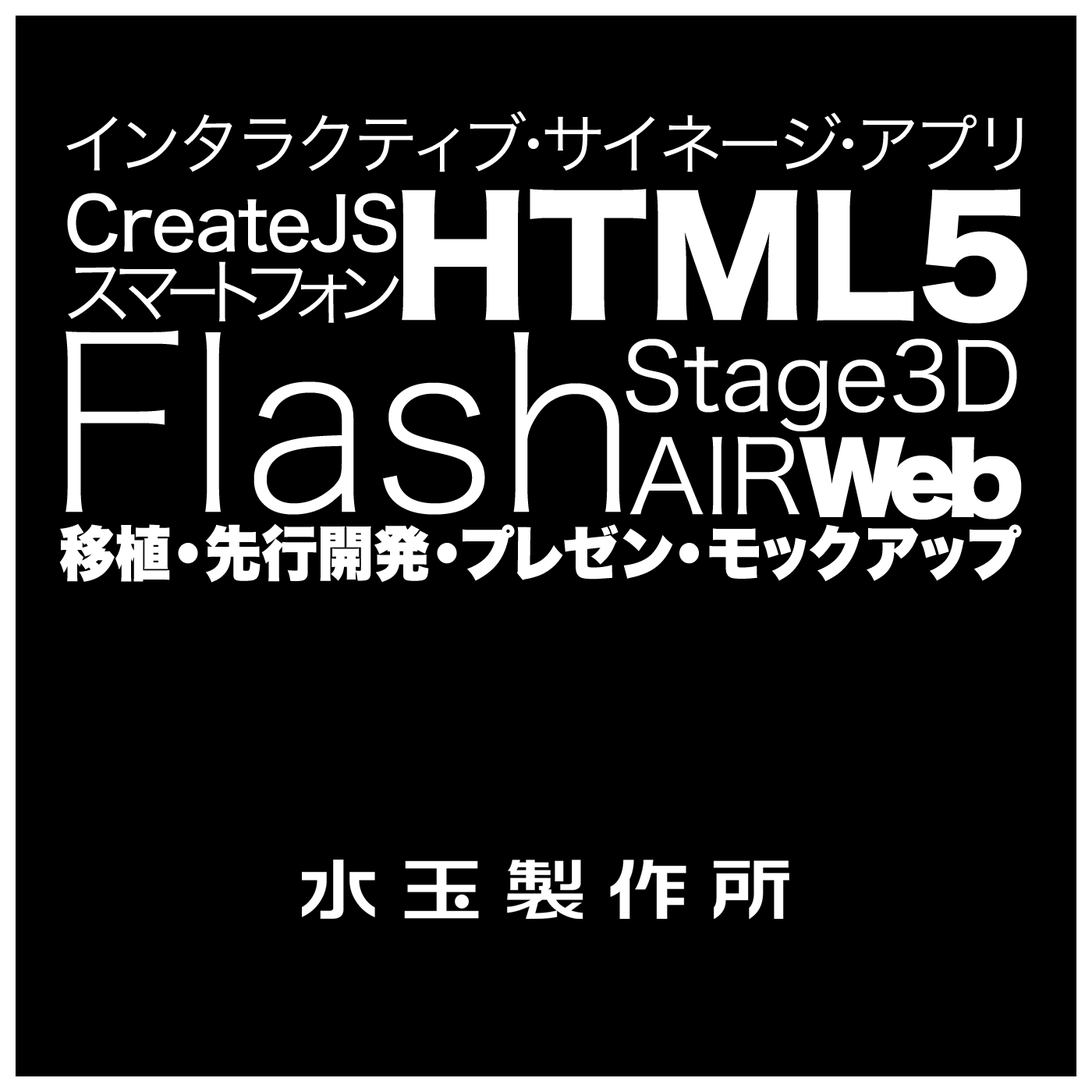
<style>
.page{position:relative;width:1092px;height:1092px;background:#000000}
.page>*{position:absolute;margin:0}
.t1{font:65.5px "HiraginoKaku-W3-90msp-RKSJ-H";letter-spacing:-0.1em;color:#ffffff}
.t2{font:73.3px "HiraginoKaku-W5-90msp-RKSJ-H";letter-spacing:-0.025em;color:#ffffff}
.t3{font:156px "HiraginoKaku-W8-90msp-RKSJ-H";color:#ffffff}
.t4{font:71.8px "HiraginoKaku-W3-90msp-RKSJ-H";letter-spacing:-0.3em;color:#ffffff}
.t5{font:71.8px "HiraginoKaku-W3-90msp-RKSJ-H";letter-spacing:-0.3em;color:#ffffff;scale:0.75 1}
.t6{font:241.8px "HiraginoKaku-W1-90msp-RKSJ-H";color:#ffffff}
.t7{font:93.6px "HiraginoKaku-W3-90msp-RKSJ-H";color:#ffffff}
.t8{font:101.4px "HiraginoKaku-W3-90msp-RKSJ-H";color:#ffffff}
.t9{font:93.6px "HiraginoKaku-W9-90msp-RKSJ-H";letter-spacing:-0.1em;color:#ffffff}
.t10{font:59.3px "HiraginoKaku-W9-90msp-RKSJ-H";color:#ffffff;scale:0.95 1}
</style>
<div class="page">
<p class="t1" style="left:66px;top:111px;width:957px;height:61px">インタラクティブ・サイネージ・アプリ</p>
<p class="t2" style="left:67px;top:193px;width:329px;height:60px">CreateJS</p>
<p class="t3" style="left:402px;top:189px;width:625px;height:135px">HTML5</p>
<p class="t4" style="left:68px;top:261px;width:331px;height:62px">スマ<span class="t5">ー</span>トフォン</p>
<p class="t6" style="left:66px;top:330px;width:555px;height:185px">Flash</p>
<p class="t7" style="left:626px;top:339px;width:391px;height:92px">Stage3D</p>
<p class="t8" style="left:629px;top:437px;width:171px;height:78px">AIR</p>
<p class="t9" style="left:799px;top:437px;width:223px;height:83px">Web</p>
<p class="t10" style="left:59px;top:523px;width:963px;height:60px">移植・先行開発・プレゼン・モックアップ</p>
</div>
